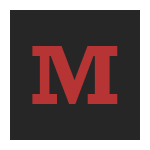
<style>
.page{position:relative;width:150px;height:150px;background:#262626}
.page>*{position:absolute;margin:0}
.t1{font:85.5px "Rockwell-Bold";color:#b73434}
</style>
<div class="page">
<p class="t1" style="left:32px;top:46px;width:86px;height:58px">M</p>
</div>
